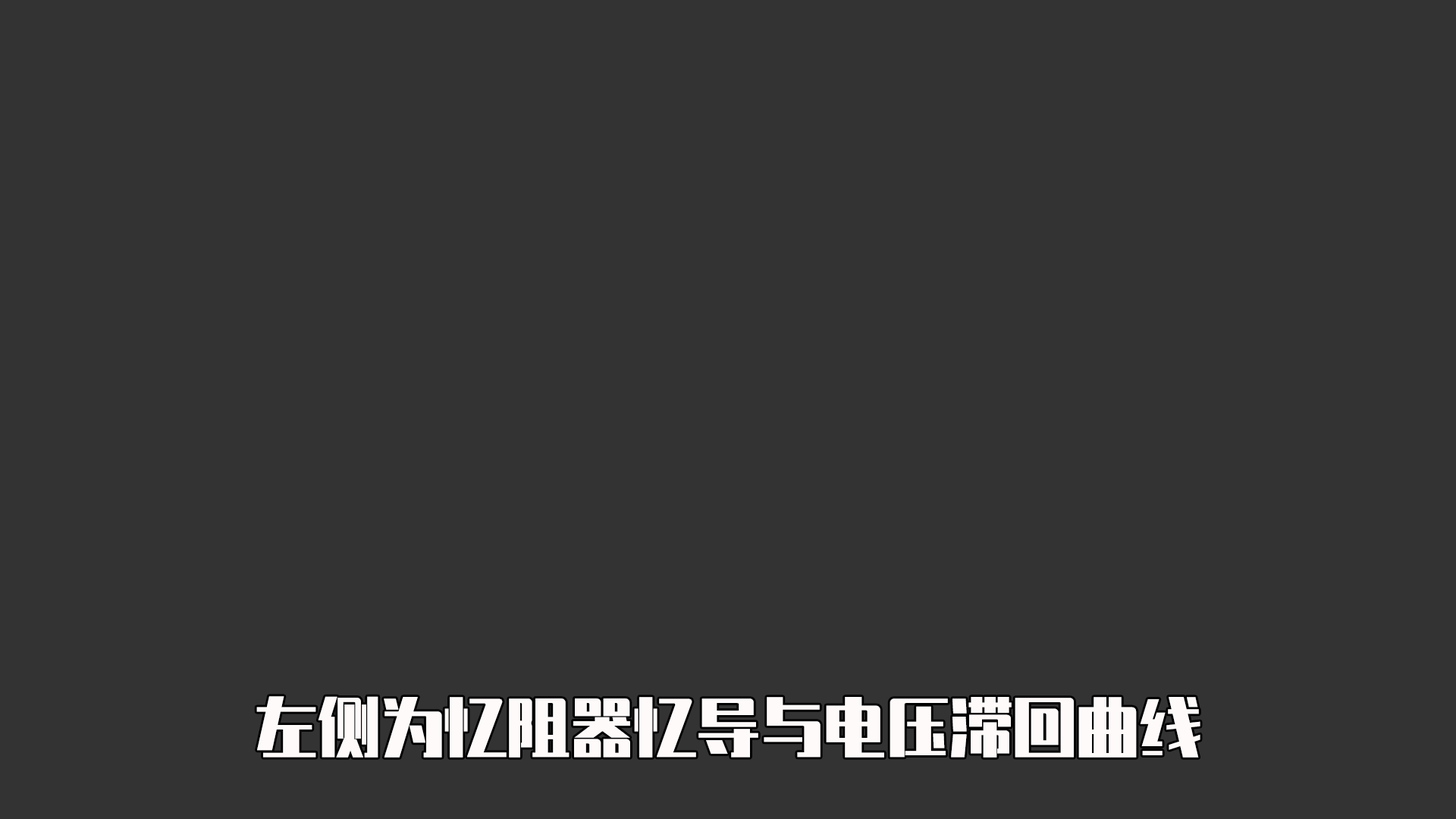
<style>
.page{position:relative;width:1456px;height:819px;background:#333333}
.page>*{position:absolute;margin:0}
.t1{font:63.2px "ZhenyanGB-Regular";color:#fefafa}
</style>
<div class="page">
<p class="t1" style="left:256px;top:696px;width:944px;height:62px">左侧为忆阻器忆导与电压滞回曲线</p>
</div>
